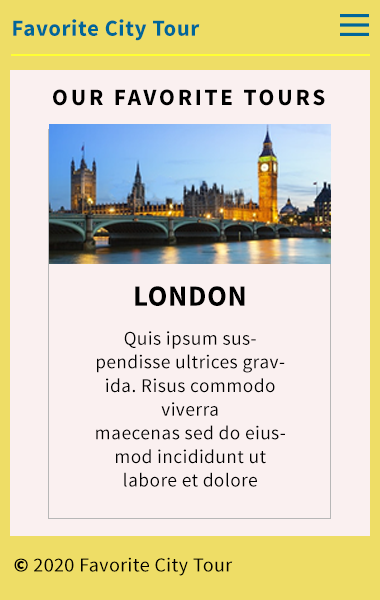
<style>
.page{position:relative;width:380px;height:600px;background:#faf0f0}
.page>*{position:absolute;margin:0}
.t1{font:23px "SourceSansPro-Bold";letter-spacing:0.02em;color:#006699}
.t2{font:23.3px "SourceSansPro-Bold";letter-spacing:0.12em;color:#000000}
.t3{font:29.2px "SourceSansPro-Bold";letter-spacing:0.02em;color:#000000}
.t4{font:19.4px/23.6px "SourceSansPro-Regular";letter-spacing:0.02em;color:#000000}
.t5{font:20px "SourceSansPro-Regular";letter-spacing:0.02em;color:#000000}
.t6{font:20px "SourceSansPro-Black";letter-spacing:0.02em;color:#000000}
</style>
<div class="page">
<p class="t1" style="left:13px;top:19px;width:187px;height:22px">Favorite City Tour</p>
<p class="t2" style="left:53px;top:89px;width:272px;height:17px">OUR FAVORITE TOURS</p>
<p class="t3" style="left:135px;top:286px;width:110px;height:20px">LONDON</p>
<p class="t4" style="left:96px;top:331px;width:189px;height:156px;text-align:center">Quis ipsum suspendisse ultrices gravida. Risus commodo viverra <br>maecenas sed do eiusmod incididunt ut labore et dolore magna</p>
<p class="t5" style="left:14px;top:557px;width:219px;height:19px"><span class="t6">©</span> 2020 Favorite City Tour</p>
</div>
